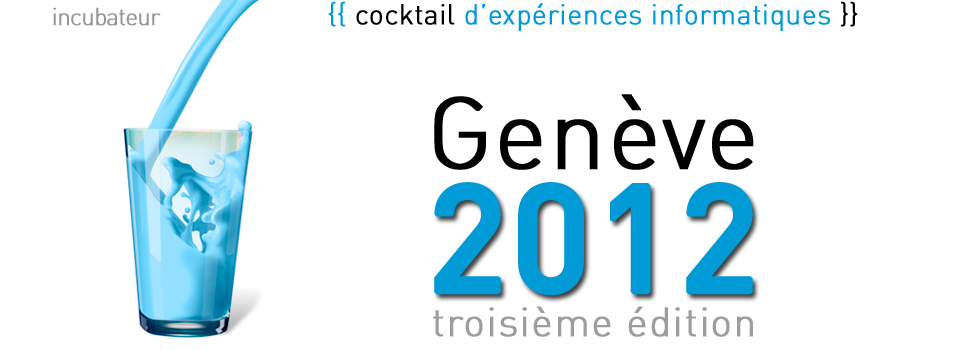
<style>
.page{position:relative;width:970px;height:350px;background:#ffffff}
.page>*{position:absolute;margin:0}
.t1{font:28px "DIN-LightAlternate";color:#009ad7;font-weight:bold}
.t2{font:28px "DIN-LightAlternate";color:#000000;font-weight:bold}
.t3{font:24px "DIN-LightAlternate";letter-spacing:-0.05em;color:#979595;font-weight:bold}
.t4{font:100px "DIN-LightAlternate";color:#000000;font-weight:bold}
.t5{font:150px "DIN-Medium";color:#009ad7;font-weight:bold}
.t6{font:40px "DIN-LightAlternate";letter-spacing:0.02em;color:#9e9c9c;font-weight:bold}
</style>
<div class="page">
<p class="t1" style="left:328px;top:1px;width:530px;height:30px">{{<span class="t2"> cocktail </span>d’expériences informatiques<span class="t2"> }}</span></p>
<p class="t3" style="left:53px;top:7px;width:108px;height:19px">incubateur</p>
<p class="t4" style="left:434px;top:94px;width:320px;height:76px">Genève</p>
<p class="t5" style="left:434px;top:182px;width:319px;height:114px">2012</p>
<p class="t6" style="left:433px;top:306px;width:320px;height:31px">troisième édition</p>
</div>
